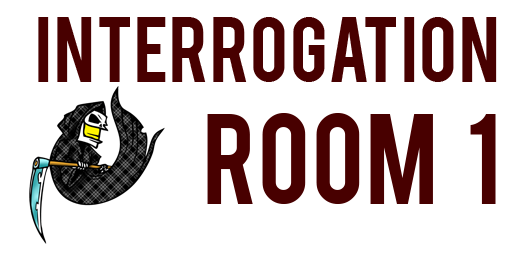
<style>
.page{position:relative;width:512px;height:256px;background:#ffffff}
.page>*{position:absolute;margin:0}
.t1{font:73.2px "Bebas";color:#480000}
.t2{font:100.2px "Bebas";color:#480000}
</style>
<div class="page">
<p class="t1" style="left:38px;top:17px;width:459px;height:187px;text-align:right">Interrogation<br><span class="t2">Room   1</span></p>
</div>
